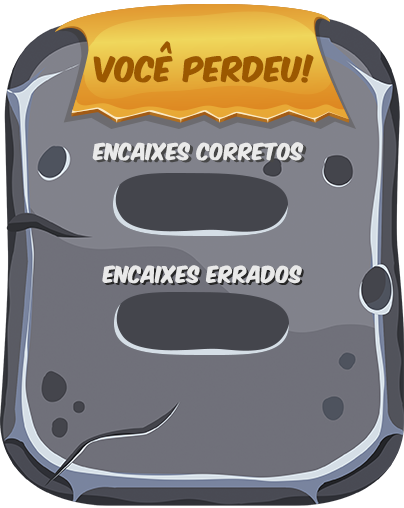
<style>
.page{position:relative;width:404px;height:508px}
.page>*{position:absolute;margin:0}
.t1{font:29.4px "KomikaAxis";letter-spacing:0.01em;color:#9b5800}
.t2{font:19.6px "KomikaAxis";letter-spacing:0.01em;color:#eaeaea}
.t3{font:19.6px "KomikaAxis";letter-spacing:0.01em;color:#e9e9e9}
</style>
<div class="page">
<p class="t1" style="left:93px;top:41px;width:221px;height:42px">Você perdeu!</p>
<p class="t2" style="left:92px;top:142px;width:212px;height:19px">encaixes corretos</p>
<p class="t3" style="left:102px;top:265px;width:200px;height:19px">ENCAIXES ERRADOS</p>
</div>
